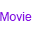
<style>
.page{position:relative;width:35px;height:35px;background:#ffffff}
.page>*{position:absolute;margin:0}
.t1{font:12px "ArialMT";color:#8810e4}
</style>
<div class="page">
<p class="t1" style="left:0px;top:12px;width:32px;height:9px">Movie</p>
</div>
